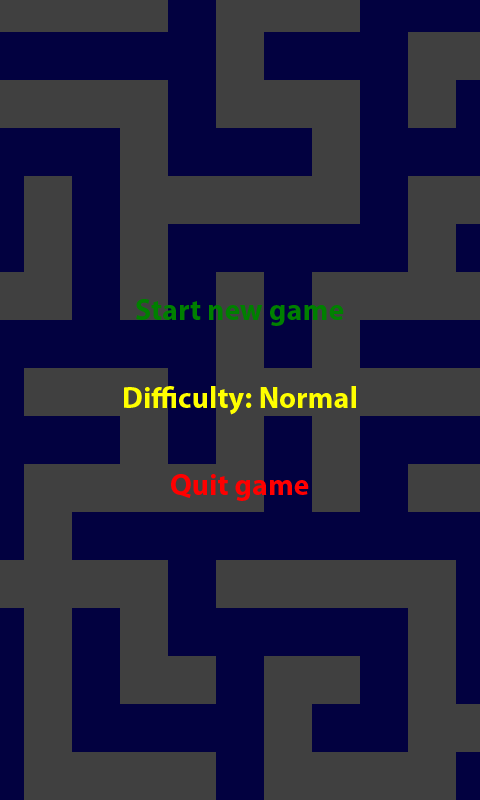
<style>
.page{position:relative;width:480px;height:800px;background:#404040}
.page>*{position:absolute;margin:0}
.t1{font:30px "MyriadPro-Bold";color:#008000}
.t2{font:30px "MyriadPro-Bold";color:#ffff00}
.t3{font:30px "MyriadPro-Bold";color:#ff0000}
</style>
<div class="page">
<p class="t1" style="left:136px;top:299px;width:208px;height:27px">Start new game</p>
<p class="t2" style="left:124px;top:386px;width:232px;height:29px">Difficulty: Normal</p>
<p class="t3" style="left:171px;top:474px;width:138px;height:27px">Quit game</p>
</div>
